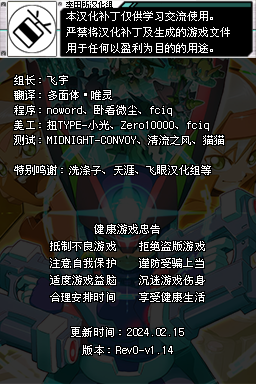
<style>
.page{position:relative;width:256px;height:384px}
.page>*{position:absolute;margin:0}
.t1{font:8px "Zfull-GB";color:#000000}
.t2{font:11px/16px "Zfull-GB";color:#ffffff}
.t3{font:11px/15px "Zfull-GB";color:#ffffff}
.t4{font:11px/17px "Zfull-GB";color:#ffffff}
.t5{font:11px/18px "Zfull-GB";color:#ffffff}
</style>
<div class="page">
<p class="t1" style="left:66px;top:1px;width:47px;height:7px">李田所汉化组</p>
<p class="t2" style="left:66px;top:11px;width:164px;height:42px">本汉化补丁仅供学习交流使用。<br>严禁将汉化补丁及生成的游戏文件<br>用于任何以盈利为目的的用途。</p>
<p class="t3" style="left:14px;top:75px;width:210px;height:100px">组长：飞宇<br>翻译：多面体·唯灵<br>程序：noword、卧看微尘、fciq<br>美工：扭TYPE-小光、Zero10000、fciq<br>测试：MIDNIGHT-CONVOY、清流之风、猫猫<br><br>特别鸣谢：洗涤子、天涯、飞眼汉化组等</p>
<p class="t4" style="left:50px;top:224px;width:155px;height:131px;text-align:center">健康游戏忠告<br>抵制不良游戏　　拒绝盗版游戏<br>注意自我保护　　谨防受骗上当<br>适度游戏益脑　　沉迷游戏伤身<br>合理安排时间　　享受健康生活<br><span class="t5"><br>更新时间：2024.02.15<br>版本：Rev0-v1.14</span></p>
</div>
